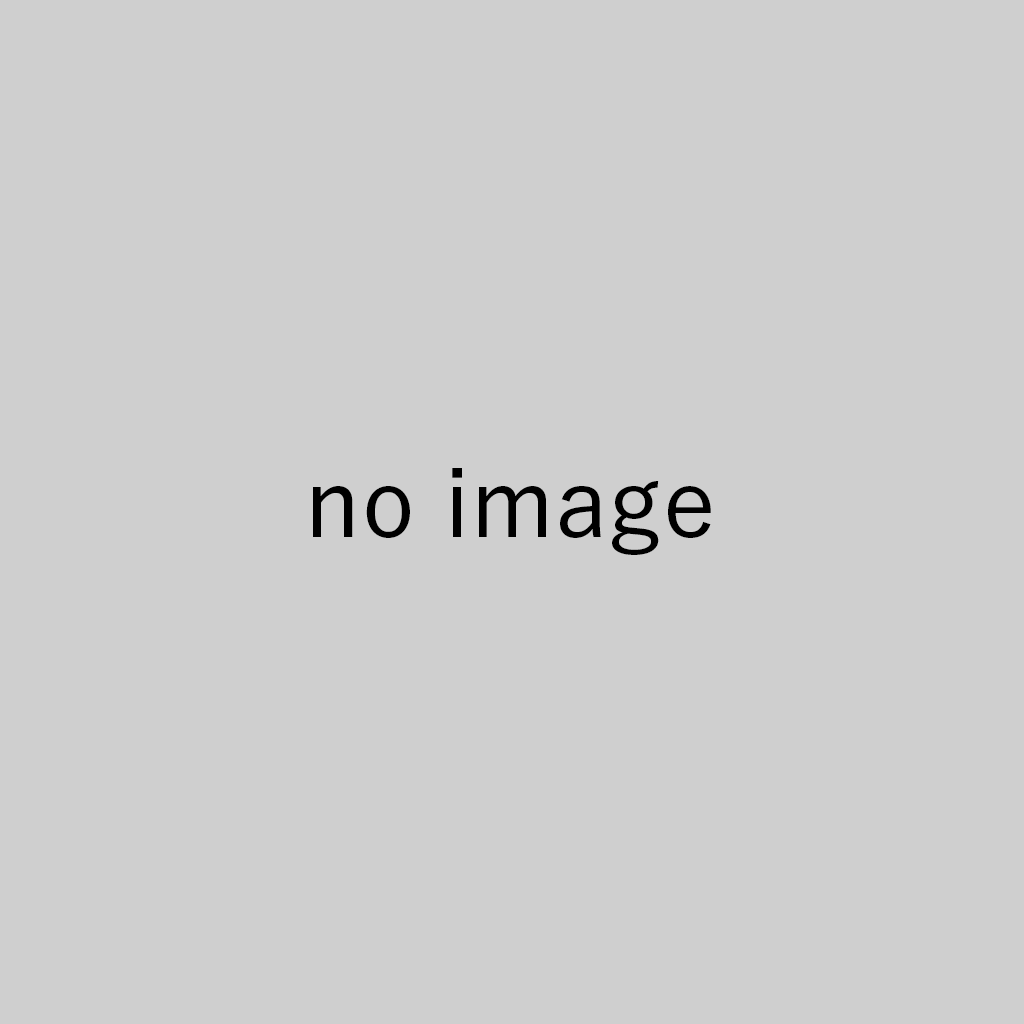
<style>
.page{position:relative;width:1024px;height:1024px;background:#cfcfcf}
.page>*{position:absolute;margin:0}
.t1{font:98px "YuGo-Medium";color:#000000}
</style>
<div class="page">
<p class="t1" style="left:313px;top:468px;width:398px;height:87px">no image</p>
</div>
